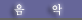
<style>
.page{position:relative;width:82px;height:20px;background:#666699}
.page>*{position:absolute;margin:0}
.t1{font:12px "BatangChe";color:#ffffff;scale:0.9 1}
</style>
<div class="page">
<p class="t1" style="left:14px;top:3px;width:49px;height:13px">음     악</p>
</div>
